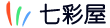
<style>
.page{position:relative;width:110px;height:28px;background:#ffffff}
.page>*{position:absolute;margin:0}
.t1{font:22px "YouYuan";color:#03061f;font-weight:bold}
</style>
<div class="page">
<p class="t1" style="left:39px;top:3px;width:67px;height:22px">七彩屋</p>
</div>
